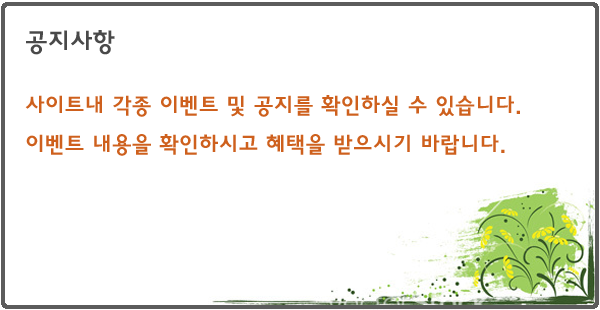
<style>
.page{position:relative;width:600px;height:310px;background:#ffffff}
.page>*{position:absolute;margin:0}
.t1{font:25px "HaanYGodic24";color:#494949}
.t2{font:22px "HaanYGodic24";color:#ce601d}
</style>
<div class="page">
<p class="t1" style="left:26px;top:30px;width:89px;height:25px">공지사항</p>
<p class="t2" style="left:25px;top:95px;width:495px;height:61px">사이트내 각종 이벤트 및 공지를 확인하실 수 있습니다. <br>이벤트 내용을 확인하시고 혜택을 받으시기 바랍니다.</p>
</div>
